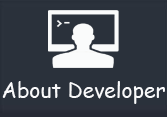
<style>
.page{position:relative;width:167px;height:117px;background:#2a313b}
.page>*{position:absolute;margin:0}
.t1{font:21px "ComicSansMS";color:#fafafb}
</style>
<div class="page">
<p class="t1" style="left:2px;top:81px;width:163px;height:23px">About Developer</p>
</div>
